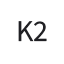
<style>
.page{position:relative;width:64px;height:64px;background:#ffffff}
.page>*{position:absolute;margin:0}
.t1{font:30px "SourceSansRoman-Regular";color:#202024}
</style>
<div class="page">
<p class="t1" style="left:18px;top:21px;width:29px;height:21px">K2</p>
</div>
